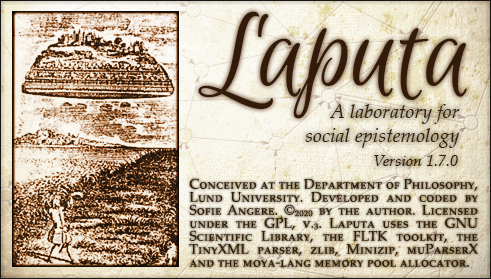
<style>
.page{position:relative;width:491px;height:279px}
.page>*{position:absolute;margin:0}
.t1{font:120px "EuphoriaScript-Regular";color:#321b0a}
.t2{font:20px "PalatinoLinotype-Italic";color:#34210a}
.t3{font:16px "PalatinoLinotype-Italic";color:#34210a}
.t4{font:14px/13px "PalatinoLinotype-Roman";color:#2f1d08;font-variant:small-caps}
</style>
<div class="page">
<p class="t1" style="left:198px;top:11px;width:269px;height:108px">Laputa</p>
<p class="t2" style="left:305px;top:104px;width:155px;height:44px;text-align:right">A laboratory for<br>social epistemology</p>
<p class="t3" style="left:374px;top:155px;width:84px;height:11px">Version 1.7.0</p>
<p class="t4" style="left:189px;top:178px;width:289px;height:89px;text-align:justify">Conceived at the Department of Philosophy, Lund University. Developed and coded by Sofie Angere. ©2020 by the author. Licensed under the GPL, v.3. Laputa uses the GNU Scientific Library, the FLTK toolkit, the TinyXML parser, zlib, Minizip, muParserX and the moya-lang memory pool allocator.</p>
</div>
